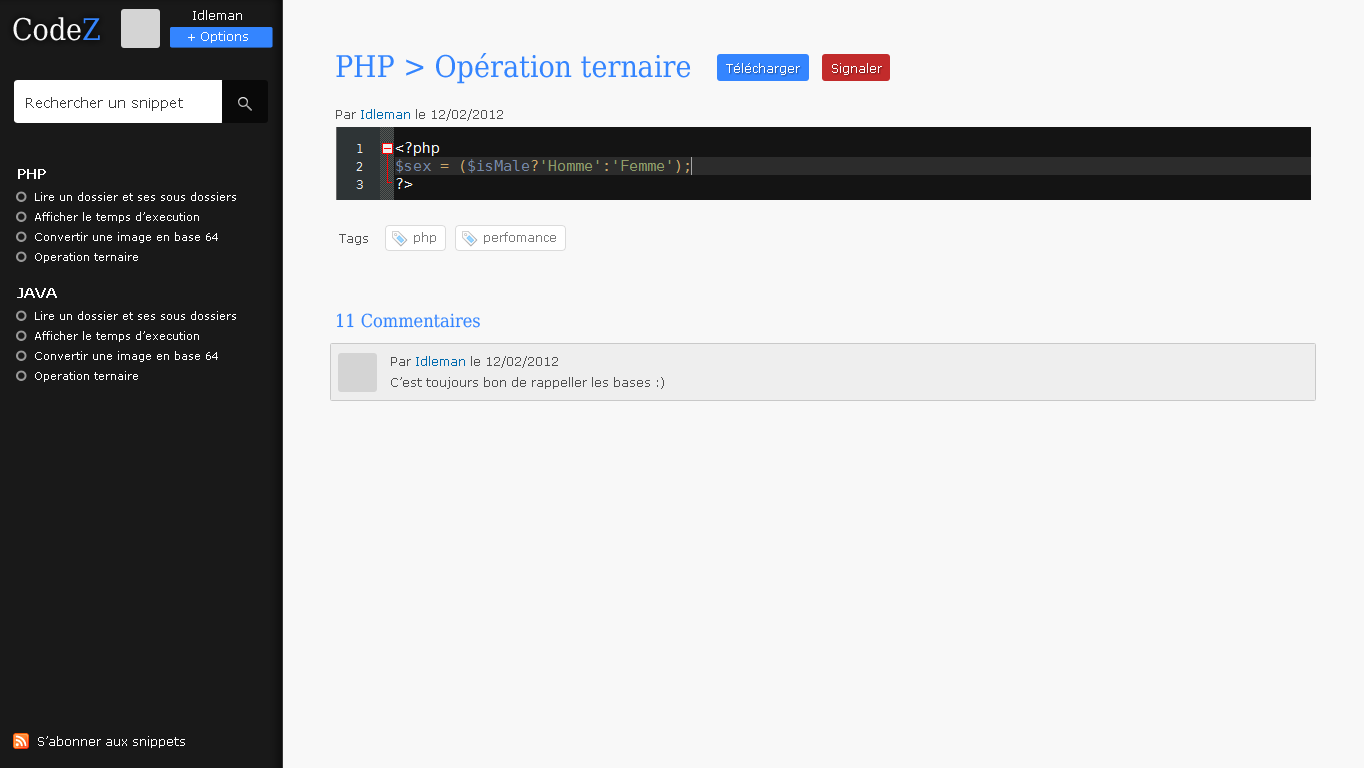
<style>
.page{position:relative;width:1364px;height:768px;background:#f8f8f8}
.page>*{position:absolute;margin:0}
.t1{font:30px "DejaVuSerifCondensed";color:#f8f8f8}
.t2{font:30px "DejaVuSerifCondensed";color:#3485ff}
.t3{font:12px "Verdana";color:#ffffff}
.t4{font:14px "Verdana";color:#373737}
.t5{font:12px "Verdana";color:#505050}
.t6{font:12px "Verdana";color:#4f4f4f}
.t7{font:12px "Verdana";color:#006aae}
.t8{font:14px "Verdana";color:#ffffff;font-weight:bold}
.t9{font:11px "Verdana";color:#ffffff}
.t10{font:12px "Verdana";color:#7b7b7b}
.t11{font:18px "DejaVuSerifCondensed";color:#3485ff}
</style>
<div class="page">
<p class="t1" style="left:13px;top:17px;width:87px;height:24px">Code<span class="t2">Z</span></p>
<p class="t3" style="left:193px;top:10px;width:49px;height:10px">Idleman</p>
<p class="t3" style="left:188px;top:31px;width:60px;height:12px">+ Options</p>
<p class="t2" style="left:336px;top:53px;width:355px;height:31px">PHP &gt; Opération ternaire</p>
<p class="t3" style="left:726px;top:63px;width:74px;height:12px">Télécharger</p>
<p class="t3" style="left:832px;top:63px;width:50px;height:12px">Signaler</p>
<p class="t4" style="left:26px;top:97px;width:157px;height:14px">Rechercher un snippet</p>
<p class="t5" style="left:336px;top:109px;width:167px;height:12px"><span class="t6">Par</span><span class="t7"> Idleman </span>le 12/02/2012</p>
<p class="t8" style="left:18px;top:169px;width:28px;height:10px">PHP</p>
<p class="t9" style="left:35px;top:192px;width:201px;height:9px">Lire un dossier et ses sous dossiers</p>
<p class="t9" style="left:35px;top:212px;width:164px;height:11px">Afficher le temps d’execution</p>
<p class="t9" style="left:35px;top:232px;width:183px;height:11px">Convertir une image en base 64</p>
<p class="t10" style="left:414px;top:232px;width:22px;height:12px">php</p>
<p class="t10" style="left:484px;top:232px;width:72px;height:12px">perfomance</p>
<p class="t6" style="left:339px;top:234px;width:29px;height:11px">Tags</p>
<p class="t9" style="left:35px;top:252px;width:103px;height:11px">Operation ternaire</p>
<p class="t8" style="left:17px;top:288px;width:40px;height:10px">JAVA</p>
<p class="t9" style="left:35px;top:311px;width:201px;height:9px">Lire un dossier et ses sous dossiers</p>
<p class="t11" style="left:337px;top:313px;width:143px;height:15px">11 Commentaires</p>
<p class="t9" style="left:35px;top:331px;width:164px;height:11px">Afficher le temps d’execution</p>
<p class="t9" style="left:35px;top:351px;width:183px;height:11px">Convertir une image en base 64</p>
<p class="t5" style="left:391px;top:356px;width:167px;height:12px"><span class="t6">Par</span><span class="t7"> Idleman </span>le 12/02/2012</p>
<p class="t9" style="left:35px;top:371px;width:103px;height:11px">Operation ternaire</p>
<p class="t6" style="left:391px;top:377px;width:273px;height:12px">C’est toujours bon de rappeller les bases :)</p>
<p class="t3" style="left:38px;top:736px;width:147px;height:12px">S’abonner aux snippets</p>
</div>
